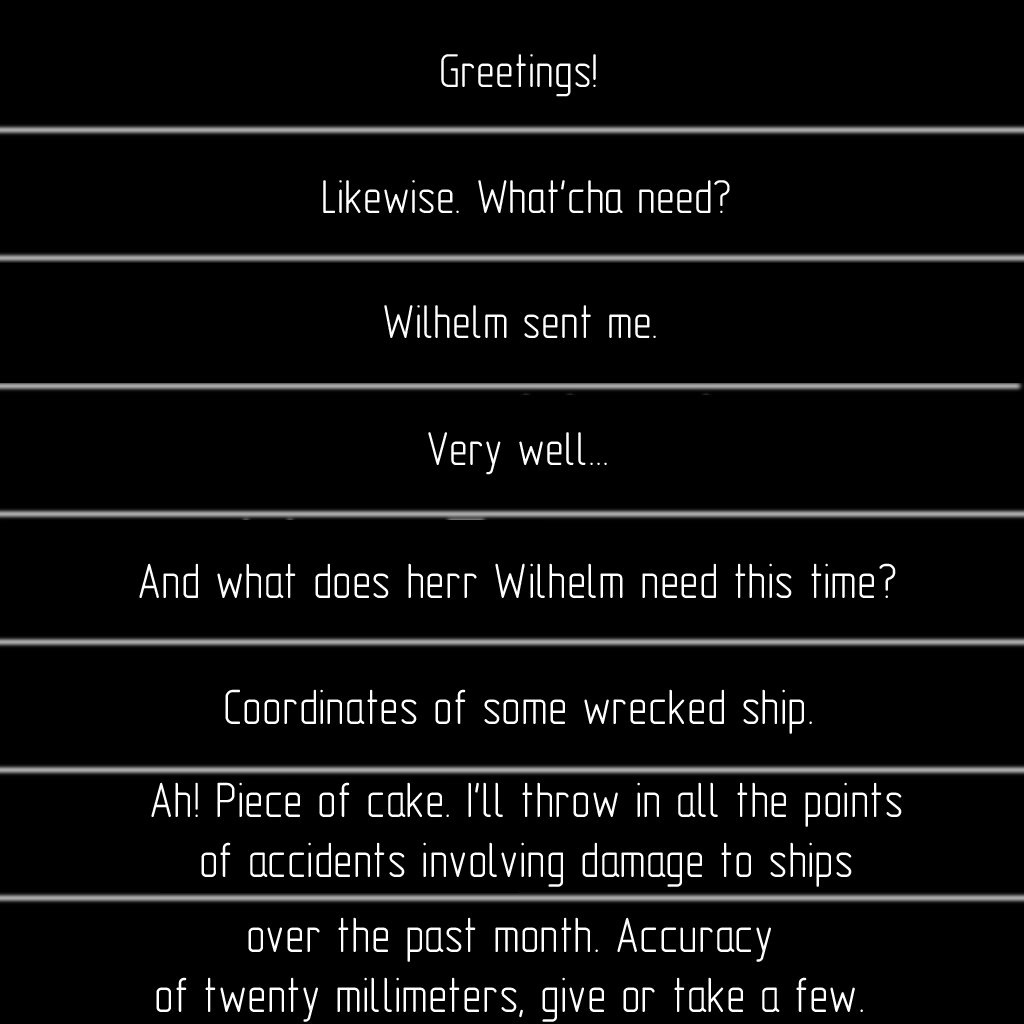
<style>
.page{position:relative;width:1024px;height:1024px;background:#000000}
.page>*{position:absolute;margin:0}
.t1{font:48px "GOST-2.304-81typeA";color:#ffffff}
.t2{font:50px "GOST-2.304-81typeA";color:#ffffff}
</style>
<div class="page">
<p class="t1" style="left:441px;top:54px;width:155px;height:43px">Greetings!</p>
<p class="t1" style="left:323px;top:180px;width:407px;height:33px">Likewise. What'cha need?</p>
<p class="t1" style="left:384px;top:305px;width:272px;height:33px">Wilhelm sent me.</p>
<p class="t1" style="left:428px;top:432px;width:179px;height:43px">Very well...</p>
<p class="t2" style="left:139px;top:563px;width:757px;height:35px">And what does herr Wilhelm need this time?</p>
<p class="t2" style="left:225px;top:689px;width:587px;height:45px">Coordinates of some wrecked ship.</p>
<p class="t2" style="left:151px;top:782px;width:751px;height:105px;text-align:center">Ah! Piece of cake. I'll throw in all the points<br>of accidents involving damage to ships</p>
<p class="t2" style="left:156px;top:917px;width:707px;height:105px;text-align:center">over the past month. Accuracy<br>of twenty millimeters, give or take a few.</p>
</div>
